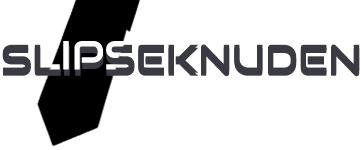
<style>
.page{position:relative;width:361px;height:150px;background:#ffffff}
.page>*{position:absolute;margin:0}
.t1{font:39.6px "Audiowide-Regular";color:#3a3a43}
</style>
<div class="page">
<p class="t1" style="left:2px;top:44px;width:358px;height:30px">SLIPSEKNUDEN</p>
<p class="t1" style="left:2px;top:47px;width:358px;height:30px">SLIPSEKNUDEN</p>
</div>
